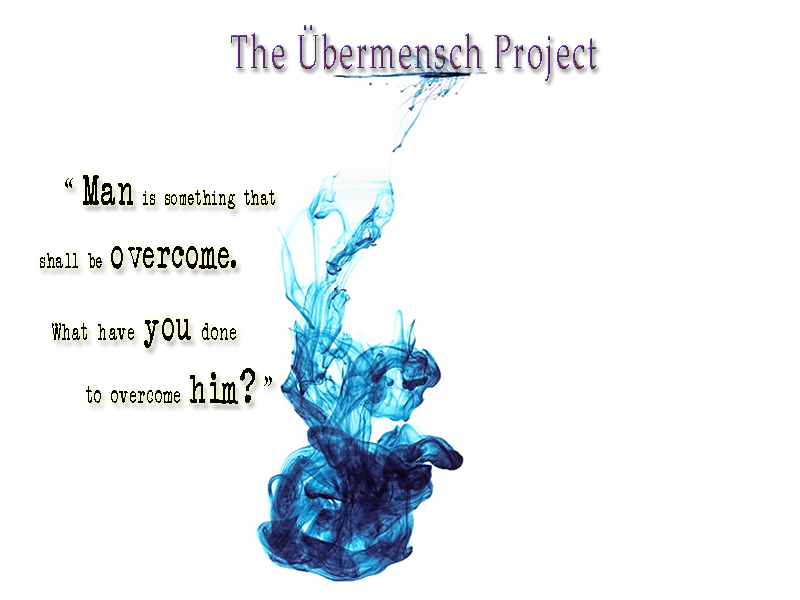
<style>
.page{position:relative;width:800px;height:600px;background:#ffffff}
.page>*{position:absolute;margin:0}
.t1{font:48px "PalatinoLinotype-Roman";letter-spacing:0.1em;scale:0.6 1}
.t2{font:48px "ArialRoundedMTBold";letter-spacing:0.1em;scale:0.6 1}
.t3{font:20.7px/9px "AnotherTypewriter";letter-spacing:0.1em;color:#000103;scale:0.63 1}
.t4{font:37.2px/9px "ACaslonPro-Regular";letter-spacing:0.1em;color:#000103;scale:0.63 1}
.t5{font:42px/9px "AnotherTypewriter";letter-spacing:0.1em;color:#000103;scale:0.63 1}
.t6{font:40px/9px "AnotherTypewriter";letter-spacing:0.1em;color:#000103;scale:0.63 1}
.t7{font:48px/9px "AnotherTypewriter";letter-spacing:0.1em;color:#000103;scale:0.63 1}
.t8{font:22.7px/9px "AnotherTypewriter";letter-spacing:0.1em;color:#000103;scale:0.63 1}
.t9{font:48px/9px "CarbonType";letter-spacing:0.1em;color:#000103;scale:0.63 1}
</style>
<div class="page">
<p class="t1" style="left:231px;top:25px;width:365px;height:56px"><span class="t2"> </span> <br>The Übermensch Project</p>
<p class="t3" style="left:40px;top:175px;width:235px;height:229px"><span class="t4">      “ </span><span class="t5">Man </span>is something that <br><br><br><br><br><br><br>   shall be <span class="t6">overcome</span><span class="t7">.<br></span><span class="t8">   <br><br><br> <br><br><br>   <br>    What have </span><span class="t6">you</span><span class="t8"> done <br><br><br> <br><br><br><br>        to overcome </span><span class="t6">him</span><span class="t9">?</span><span class="t4">”</span></p>
</div>
